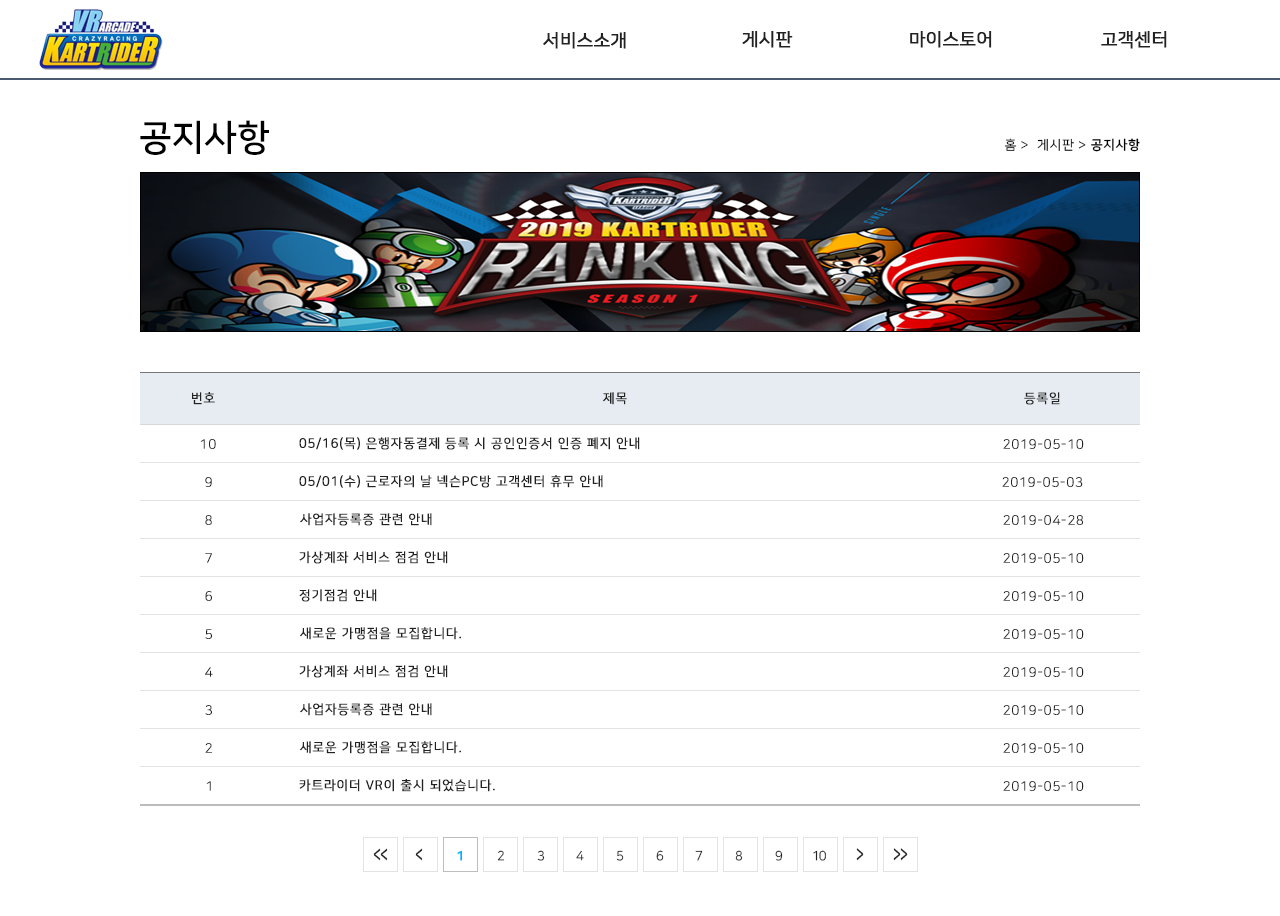
<style>
.page{position:relative;width:1280px;height:916px;background:#ffffff}
.page>*{position:absolute;margin:0}
.t1{font:18px "NanumSquareR";color:#222222;font-weight:bold}
.t2{font:36px "NanumSquareB";color:#000000}
.t3{font:13px "NanumSquareR";letter-spacing:0.05em;color:#000000}
.t4{font:13px "NanumSquareL";letter-spacing:0.05em;color:#000000}
.t5{font:13px "NanumSquareB";letter-spacing:0.05em;color:#000000}
.t6{font:13px "NanumSquareR";letter-spacing:0.05em;color:#222222;text-transform:uppercase;font-weight:bold}
.t7{font:13px "NanumSquareL";letter-spacing:0.05em;color:#222222;text-transform:uppercase;font-weight:bold}
.t8{font:13px "NanumSquareL";letter-spacing:0.05em;text-transform:uppercase;font-weight:bold}
.t9{font:20.5px "NanumSquareB";letter-spacing:-0.075em;color:#222222;scale:0.63 1}
.t10{font:13px "NanumSquareB";letter-spacing:-0.075em;color:#00b6ff;font-weight:bold}
.t11{font:13px "NanumSquareR";letter-spacing:-0.075em}
.t12{font:13px "NanumSquareR";letter-spacing:-0.075em;color:#222222}
.t13{font:21.1px "NanumSquareB";letter-spacing:-0.075em;color:#222222;scale:0.61 1}
</style>
<div class="page">
<p class="t1" style="left:742px;top:30px;width:51px;height:18px">게시판</p>
<p class="t1" style="left:910px;top:30px;width:82px;height:18px">마이스토어</p>
<p class="t1" style="left:1101px;top:30px;width:66px;height:18px">고객센터</p>
<p class="t1" style="left:543px;top:31px;width:83px;height:18px">서비스소개</p>
<p class="t2" style="left:140px;top:120px;width:129px;height:35px">공지사항</p>
<p class="t3" style="left:1004px;top:138px;width:136px;height:14px">홈 <span class="t4">&gt; </span> 게시판 &gt; <span class="t5">공지사항</span></p>
<p class="t6" style="left:192px;top:392px;width:23px;height:13px">번호</p>
<p class="t6" style="left:603px;top:392px;width:24px;height:13px">제목</p>
<p class="t6" style="left:1024px;top:392px;width:36px;height:13px">등록일</p>
<p class="t6" style="left:299px;top:437px;width:341px;height:13px">05/16(목) 은행자동결제 등록 시 공인인증서 인증 폐지 안내</p>
<p class="t7" style="left:200px;top:439px;width:16px;height:10px">10</p>
<p class="t7" style="left:1003px;top:439px;width:81px;height:10px">2019-05-10</p>
<p class="t7" style="left:205px;top:477px;width:7px;height:10px">9</p>
<p class="t6" style="left:299px;top:475px;width:304px;height:13px">05/01(수) 근로자의 날 넥슨PC방 고객센터 휴무 안내</p>
<p class="t7" style="left:1002px;top:477px;width:81px;height:10px">2019-05-03</p>
<p class="t8" style="left:205px;top:515px;width:7px;height:10px">8</p>
<p class="t6" style="left:300px;top:513px;width:132px;height:13px">사업자등록증 관련 안내</p>
<p class="t7" style="left:1003px;top:515px;width:80px;height:10px">2019-04-28</p>
<p class="t7" style="left:205px;top:553px;width:7px;height:10px">7</p>
<p class="t6" style="left:299px;top:551px;width:149px;height:13px">가상계좌 서비스 점검 안내</p>
<p class="t7" style="left:1003px;top:553px;width:81px;height:10px">2019-05-10</p>
<p class="t7" style="left:205px;top:591px;width:7px;height:10px">6</p>
<p class="t6" style="left:299px;top:589px;width:78px;height:13px">정기점검 안내</p>
<p class="t7" style="left:1003px;top:591px;width:81px;height:10px">2019-05-10</p>
<p class="t7" style="left:205px;top:629px;width:7px;height:10px">5</p>
<p class="t6" style="left:300px;top:627px;width:161px;height:13px">새로운 가맹점을 모집합니다.</p>
<p class="t7" style="left:1003px;top:629px;width:81px;height:10px">2019-05-10</p>
<p class="t6" style="left:299px;top:665px;width:149px;height:13px">가상계좌 서비스 점검 안내</p>
<p class="t7" style="left:205px;top:667px;width:8px;height:10px">4</p>
<p class="t7" style="left:1003px;top:667px;width:81px;height:10px">2019-05-10</p>
<p class="t7" style="left:205px;top:705px;width:7px;height:10px">3</p>
<p class="t6" style="left:300px;top:703px;width:132px;height:13px">사업자등록증 관련 안내</p>
<p class="t7" style="left:1003px;top:705px;width:81px;height:10px">2019-05-10</p>
<p class="t7" style="left:205px;top:743px;width:7px;height:10px">2</p>
<p class="t6" style="left:300px;top:741px;width:161px;height:13px">새로운 가맹점을 모집합니다.</p>
<p class="t7" style="left:1003px;top:743px;width:81px;height:10px">2019-05-10</p>
<p class="t8" style="left:206px;top:781px;width:5px;height:10px">1</p>
<p class="t6" style="left:299px;top:779px;width:196px;height:13px">카트라이더 VR이 출시 되었습니다.</p>
<p class="t7" style="left:1003px;top:781px;width:81px;height:10px">2019-05-10</p>
<p class="t9" style="left:373px;top:848px;width:15px;height:13px">&lt;&lt;</p>
<p class="t9" style="left:415px;top:848px;width:8px;height:13px">&lt;</p>
<p class="t10" style="left:457px;top:850px;width:6px;height:11px">1</p>
<p class="t11" style="left:497px;top:850px;width:8px;height:11px">2</p>
<p class="t12" style="left:537px;top:850px;width:8px;height:11px">3</p>
<p class="t11" style="left:576px;top:850px;width:8px;height:11px">4</p>
<p class="t11" style="left:616px;top:850px;width:8px;height:11px">5</p>
<p class="t11" style="left:656px;top:850px;width:8px;height:11px">6</p>
<p class="t12" style="left:695px;top:850px;width:8px;height:11px">7</p>
<p class="t11" style="left:735px;top:850px;width:8px;height:11px">8</p>
<p class="t12" style="left:775px;top:850px;width:8px;height:11px">9</p>
<p class="t12" style="left:813px;top:850px;width:13px;height:11px">10</p>
<p class="t13" style="left:856px;top:848px;width:8px;height:13px;rotate:180deg">&lt;</p>
<p class="t13" style="left:893px;top:848px;width:15px;height:13px;rotate:180deg">&lt;&lt;</p>
</div>
